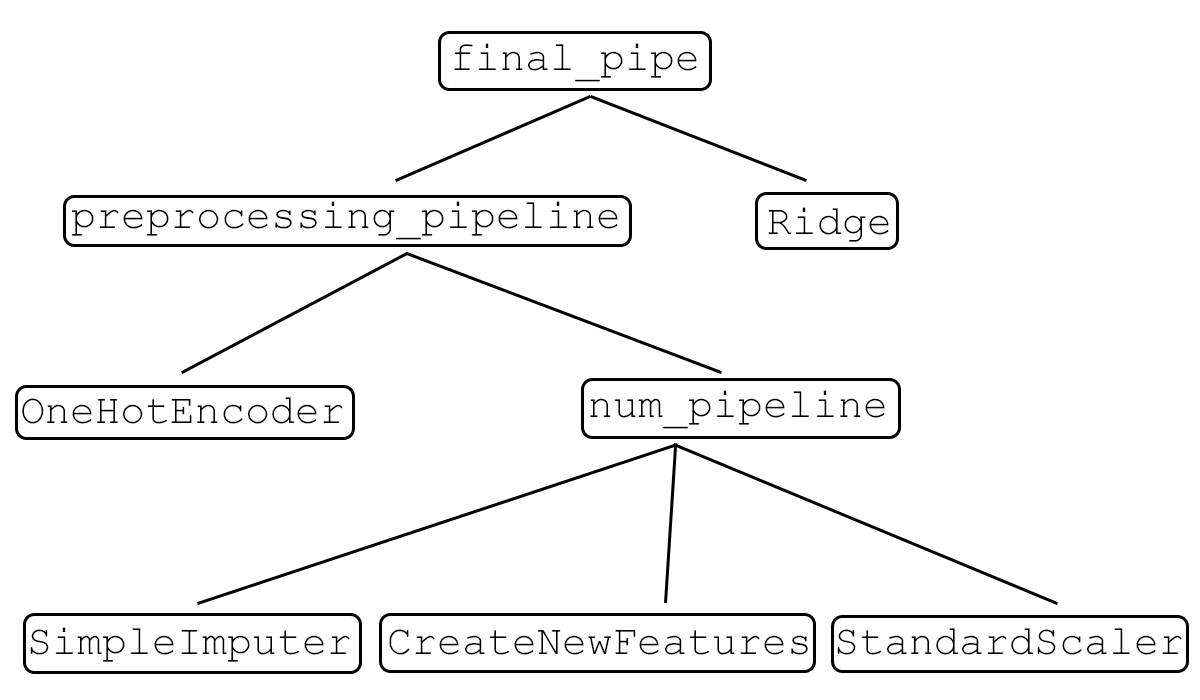
<style>
.page{position:relative;width:1200px;height:700px;background:#ffffff}
.page>*{position:absolute;margin:0}
.t1{font:41.7px "CourierNewPSMT";color:#000000}
</style>
<div class="page">
<p class="t1" style="left:454px;top:43px;width:243px;height:39px">final_pipe</p>
<p class="t1" style="left:71px;top:201px;width:547px;height:39px">preprocessing_pipeline</p>
<p class="t1" style="left:768px;top:207px;width:121px;height:35px">Ridge</p>
<p class="t1" style="left:590px;top:390px;width:295px;height:39px">num_pipeline</p>
<p class="t1" style="left:22px;top:397px;width:321px;height:27px">OneHotEncoder</p>
<p class="t1" style="left:30px;top:627px;width:320px;height:35px">SimpleImputer</p>
<p class="t1" style="left:389px;top:629px;width:419px;height:26px">CreateNewFeatures</p>
<p class="t1" style="left:837px;top:628px;width:345px;height:27px">StandardScaler</p>
</div>
